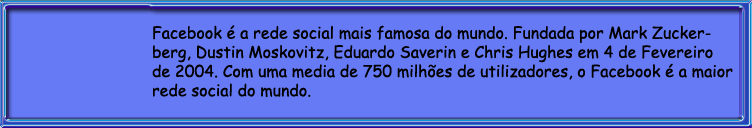
<style>
.page{position:relative;width:752px;height:128px;background:#667af5}
.page>*{position:absolute;margin:0}
.t1{font:16px "ComicSansMS";color:#000000}
</style>
<div class="page">
<p class="t1" style="left:152px;top:25px;width:581px;height:73px">Facebook é a rede social mais famosa do mundo. Fundada por Mark Zuckerberg, Dustin Moskovitz, Eduardo Saverin e Chris Hughes em 4 de Fevereiro de 2004. Com uma media de 750 milhões de utilizadores, o Facebook é a maior rede social do mundo.</p>
</div>
